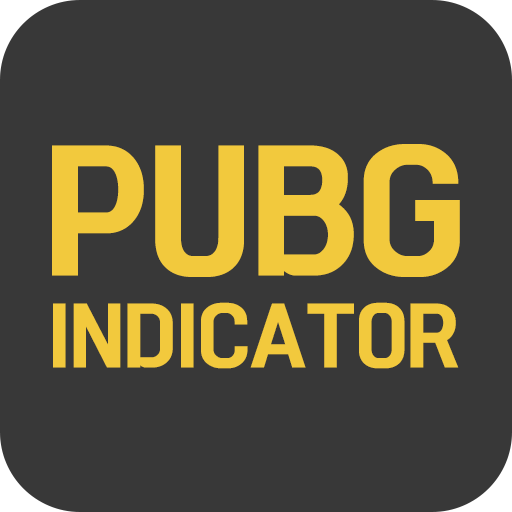
<style>
.page{position:relative;width:512px;height:512px;background:#383838}
.page>*{position:absolute;margin:0}
.t1{font:150px "KoreanBLACK-B";color:#f2c93d}
.t2{font:74px "KoreanBLACK-B";color:#f2c93d}
</style>
<div class="page">
<p class="t1" style="left:52px;top:144px;width:408px;height:133px">PUBG</p>
<p class="t2" style="left:53px;top:302px;width:406px;height:67px">INDICATOR</p>
</div>
